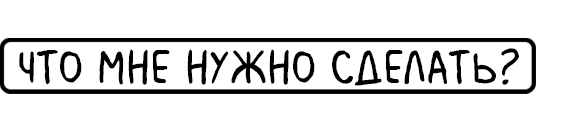
<style>
.page{position:relative;width:576px;height:130px;background:#ffffff}
.page>*{position:absolute;margin:0}
.t1{font:50px "MilkMustacheBB";color:#000000}
</style>
<div class="page">
<p class="t1" style="left:19px;top:48px;width:500px;height:38px">что мне нужно сделать?</p>
</div>
